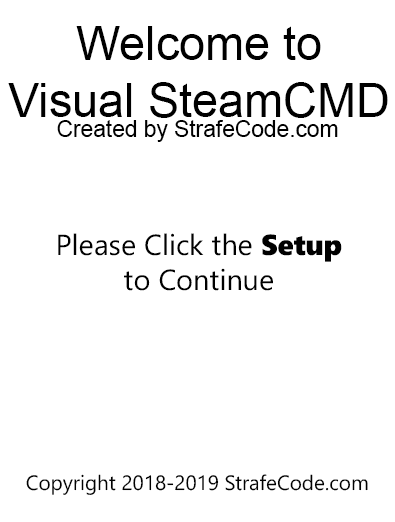
<style>
.page{position:relative;width:395px;height:522px;background:#ffffff}
.page>*{position:absolute;margin:0}
.t1{font:46.8px "ArialMT";color:#000000}
.t2{font:22.7px "ArialMT";color:#000000}
.t3{font:28.9px "SegoeUI";color:#000000}
.t4{font:28.9px "SegoeUIBlack";color:#000000}
.t5{font:20.7px "SegoeUI";color:#000000}
</style>
<div class="page">
<p class="t1" style="left:8px;top:26px;width:380px;height:92px;text-align:center">Welcome to<br>Visual SteamCMD</p>
<p class="t2" style="left:57px;top:120px;width:281px;height:22px">Created by StrafeCode.com</p>
<p class="t3" style="left:58px;top:233px;width:284px;height:58px;text-align:center">Please Click the <span class="t4">Setup<br></span>to Continue</p>
<p class="t5" style="left:26px;top:474px;width:342px;height:21px">Copyright 2018-2019 StrafeCode.com</p>
</div>
